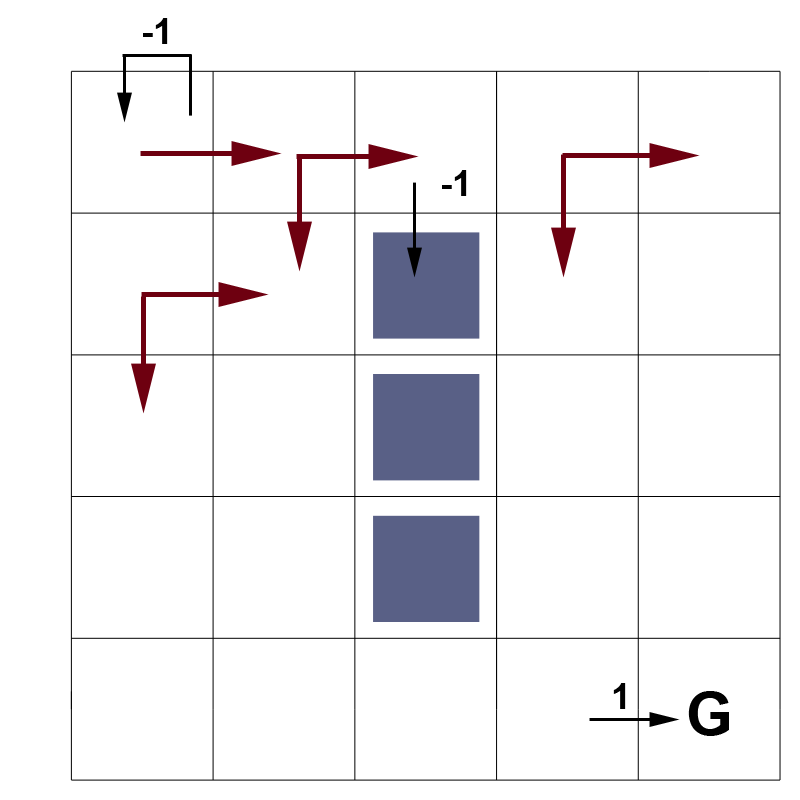
<style>
.page{position:relative;width:800px;height:800px;background:#ffffff}
.page>*{position:absolute;margin:0}
.t1{font:36px "Arial-BoldMT";color:#000000}
.t2{font:60px "Arial-BoldMT";color:#000000}
</style>
<div class="page">
<p class="t1" style="left:143px;top:18px;width:25px;height:26px">-1</p>
<p class="t1" style="left:442px;top:170px;width:25px;height:26px">-1</p>
<p class="t1" style="left:613px;top:683px;width:13px;height:26px">1</p>
<p class="t2" style="left:688px;top:691px;width:41px;height:45px">G</p>
</div>
